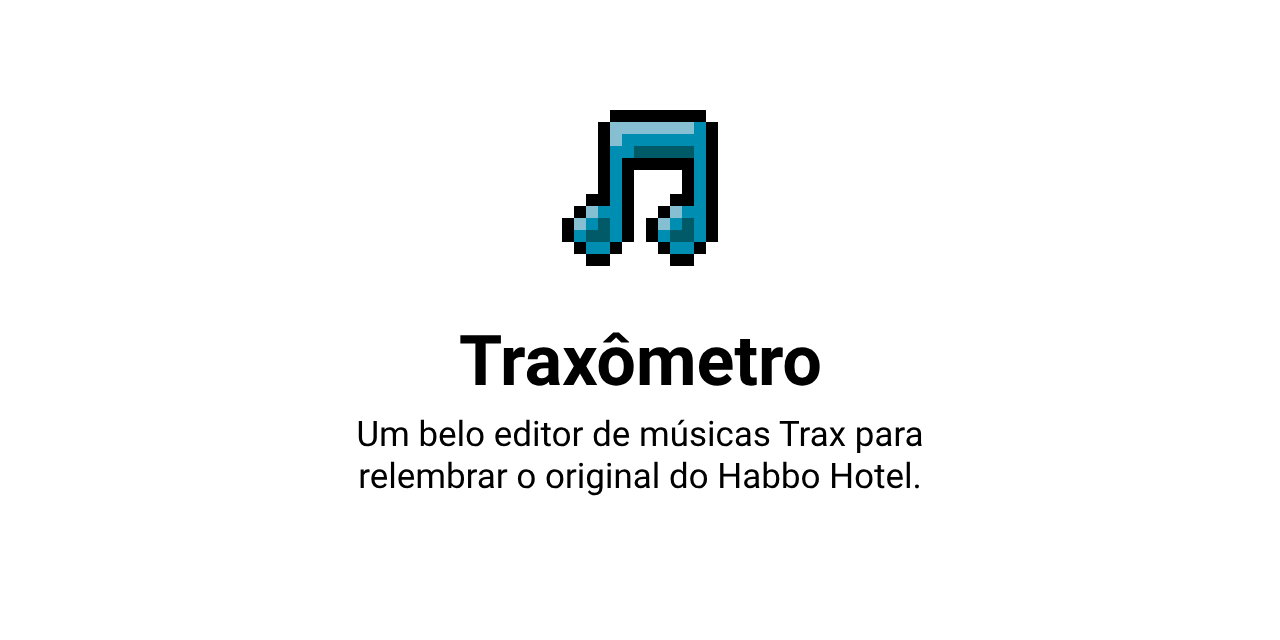
<style>
.page{position:relative;width:1280px;height:640px;background:#ffffff}
.page>*{position:absolute;margin:0}
.t1{font:70px "Roboto-Bold";color:#000000}
.t2{font:35px "Roboto-Regular";color:#000000}
</style>
<div class="page">
<p class="t1" style="left:460px;top:332px;width:360px;height:54px">Traxômetro</p>
<p class="t2" style="left:358px;top:419px;width:564px;height:77px;text-align:center">Um belo editor de músicas Trax para<br>relembrar o original do Habbo Hotel.</p>
</div>
